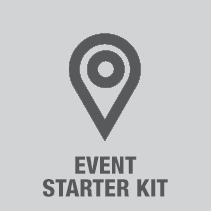
<style>
.page{position:relative;width:211px;height:211px;background:#d1d3d4}
.page>*{position:absolute;margin:0}
.t1{font:24px/22.8px "HelveticaNeueLTStd-HvCn";color:#58595b;text-transform:uppercase}
</style>
<div class="page">
<p class="t1" style="left:43px;top:156px;width:125px;height:41px;text-align:center">Event <br>Starter Kit</p>
</div>
